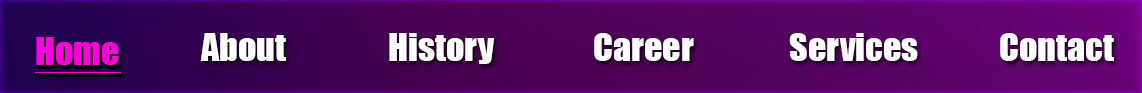
<style>
.page{position:relative;width:1142px;height:93px}
.page>*{position:absolute;margin:0}
.t1{font:36px "Impact";color:#ff00de}
.t2{font:36px "Impact";color:#ffffff}
</style>
<div class="page">
<p class="t1" style="left:36px;top:37px;width:83px;height:28px">Home</p>
<p class="t2" style="left:200px;top:33px;width:86px;height:28px">About</p>
<p class="t2" style="left:389px;top:33px;width:106px;height:31px">History</p>
<p class="t2" style="left:594px;top:33px;width:100px;height:28px">Career</p>
<p class="t2" style="left:789px;top:33px;width:129px;height:28px">Services</p>
<p class="t2" style="left:1000px;top:33px;width:114px;height:28px">Contact</p>
</div>
